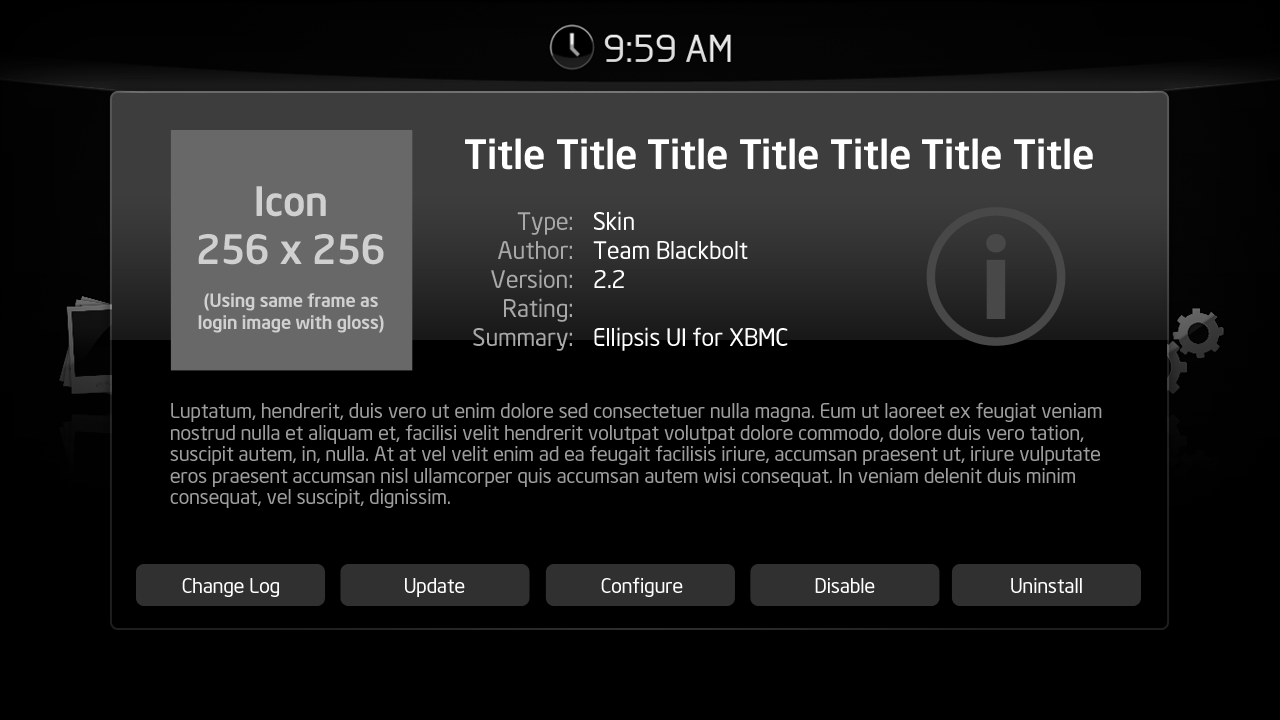
<style>
.page{position:relative;width:1280px;height:720px;background:#000000}
.page>*{position:absolute;margin:0}
.t1{font:40px "NeoSansIntel-Medium";color:#ffffff}
.t2{font:18px "NeoSansIntel-Medium";color:#d0d0d0}
.t3{font:40px "NeoSansIntel-Medium";color:#d0d0d0}
.t4{font:24px/29px "NeoSansIntel";color:#a8a8a8}
.t5{font:24px/29px "NeoSansIntel";color:#fefefe}
.t6{font:20px/21.6px "NeoSansIntel";color:#9d9d9d}
.t7{font:20px "NeoSansIntel";color:#ffffff}
</style>
<div class="page">
<p class="t1" style="left:465px;top:138px;width:628px;height:32px">Title Title Title Title Title Title Title</p>
<p class="t2" style="left:198px;top:186px;width:186px;height:147px;text-align:center"><span class="t3">Icon<br>256 x 256<br></span><br>(Using same frame as<br>login image with gloss)</p>
<p class="t4" style="left:473px;top:212px;width:99px;height:139px;text-align:right">Type:<br>Author:<br>Version:<br>Rating:<br>Summary:</p>
<p class="t5" style="left:593px;top:211px;width:195px;height:140px">Skin<br>Team Blackbolt<br>2.2<br><br>Ellipsis UI for XBMC</p>
<p class="t6" style="left:170px;top:402px;width:932px;height:106px">Luptatum, hendrerit, duis vero ut enim dolore sed consectetuer nulla magna. Eum ut laoreet ex feugiat veniam <br>nostrud nulla et aliquam et, facilisi velit hendrerit volutpat volutpat dolore commodo, dolore duis vero tation, <br>suscipit autem, in, nulla. At at vel velit enim ad ea feugait facilisis iriure, accumsan praesent ut, iriure vulputate <br>eros praesent accumsan nisl ullamcorper quis accumsan autem wisi consequat. In veniam delenit duis minim <br>consequat, vel suscipit, dignissim.</p>
<p class="t7" style="left:182px;top:578px;width:97px;height:19px">Change Log</p>
<p class="t7" style="left:405px;top:578px;width:60px;height:19px">Update</p>
<p class="t7" style="left:601px;top:577px;width:82px;height:20px">Configure</p>
<p class="t7" style="left:815px;top:578px;width:60px;height:15px">Disable</p>
<p class="t7" style="left:1011px;top:578px;width:71px;height:15px">Uninstall</p>
</div>
